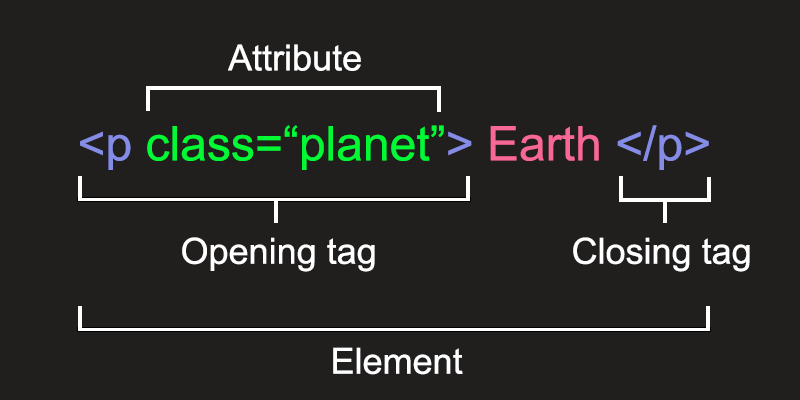
<style>
.page{position:relative;width:800px;height:400px;background:#211e1e}
.page>*{position:absolute;margin:0}
.t1{font:36px "ArialMT";color:#ffffff}
.t2{font:48px "ArialMT";color:#00fb35}
.t3{font:48px "ArialMT";color:#858ce6}
.t4{font:48px "ArialMT";color:#f86894}
</style>
<div class="page">
<p class="t1" style="left:228px;top:44px;width:133px;height:27px">Attribute</p>
<p class="t2" style="left:80px;top:125px;width:629px;height:45px"><span class="t3">&lt;p </span>class=“planet”<span class="t3">&gt; </span><span class="t4">Earth</span><span class="t3"> &lt;/p&gt;</span></p>
<p class="t1" style="left:182px;top:237px;width:193px;height:35px">Opening tag</p>
<p class="t1" style="left:573px;top:237px;width:177px;height:35px">Closing tag</p>
<p class="t1" style="left:333px;top:347px;width:130px;height:28px">Element</p>
</div>
